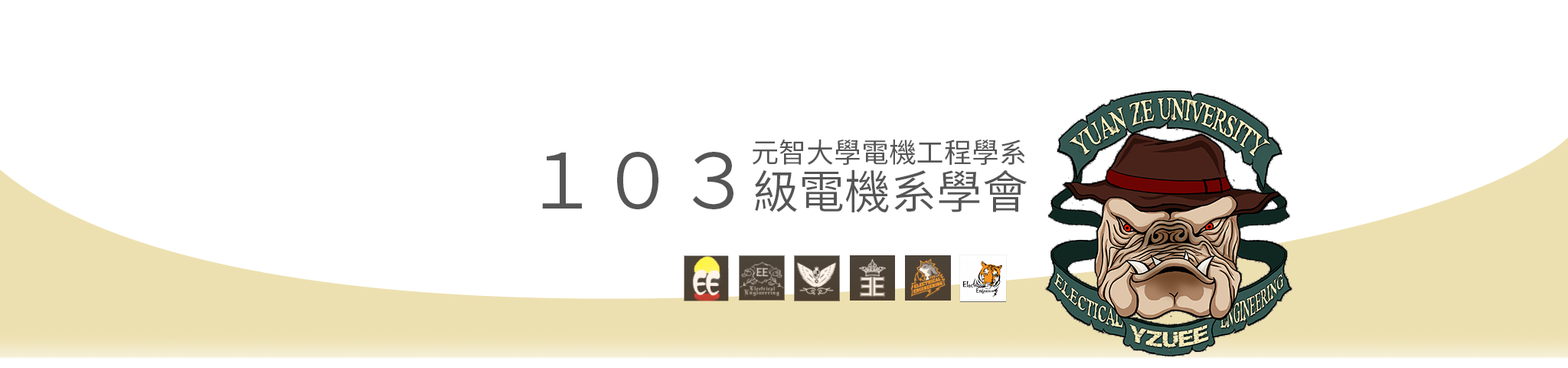
<style>
.page{position:relative;width:1568px;height:368px;background:#ffffff}
.page>*{position:absolute;margin:0}
.t1{font:27.6px "NotoSansHant-Regular";color:#555555}
.t2{font:45.9px "NotoSansHant-DemiLight";color:#555555}
.t3{font:76.6px "NotoSansHant-DemiLight";color:#555555}
</style>
<div class="page">
<p class="t1" style="left:753px;top:139px;width:272px;height:26px">元智大學電機工程學系</p>
<p class="t2" style="left:542px;top:152px;width:485px;height:60px"><span class="t3">１０３</span>級電機系學會</p>
</div>
